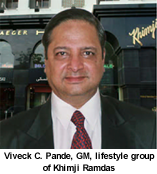
<style>
.page{position:relative;width:157px;height:174px}
.page>*{position:absolute;margin:0}
.t1{font:9px/12px "Arial-BoldMT";letter-spacing:-0.025em;color:#000000}
</style>
<div class="page">
<p class="t1" style="left:4px;top:152px;width:151px;height:21px;text-align:center">Viveck C. Pande, GM, lifestyle group <br>of Khimji Ramdas</p>
</div>
